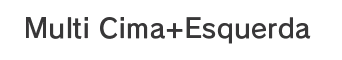
<style>
.page{position:relative;width:342px;height:60px;background:#ffffff}
.page>*{position:absolute;margin:0}
.t1{font:26.7px "RodinPro-DB";letter-spacing:0.008em;color:#383738}
</style>
<div class="page">
<p class="t1" style="left:26px;top:17px;width:285px;height:27px">Multi Cima+Esquerda</p>
</div>
